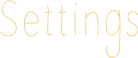
<style>
.page{position:relative;width:138px;height:58px;background:#ffffff}
.page>*{position:absolute;margin:0}
.t1{font:50px "AvenirCondensedHand";color:#eed694}
</style>
<div class="page">
<p class="t1" style="left:0px;top:0px;width:138px;height:58px">Settings</p>
</div>
